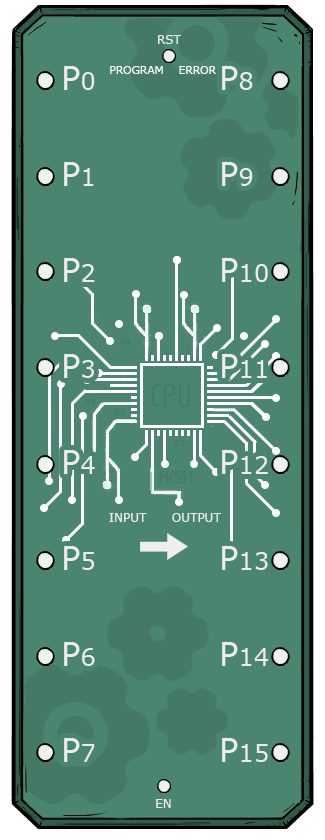
<style>
.page{position:relative;width:325px;height:840px;background:#4a8570}
.page>*{position:absolute;margin:0}
.t1{font:12px "Verdana";color:#ececec}
.t2{font:24px/48px "Verdana";color:#ececec}
.t3{font:32px/48px "Verdana";color:#ececec}
.t4{font:10.7px "Verdana";color:#ffffff}
.t5{font:8px "Verdana";color:#437a66}
.t6{font:32px "Economica-Regular";color:#437a66}
.t7{font:16px "Economica-Regular";color:#437a66}
</style>
<div class="page">
<p class="t1" style="left:158px;top:35px;width:23px;height:9px">RST</p>
<p class="t2" style="left:64px;top:66px;width:205px;height:696px"><span class="t3">P</span>0<span class="t3">           P</span>8<br><span class="t3"><br>P</span>1<span class="t3">           P</span>9<br><span class="t3"><br>P</span>2<span class="t3">           P</span>10<br><span class="t3"><br>P</span>3<span class="t3">           P</span>11<br><span class="t3"><br>P</span>4<span class="t3">           P</span>12<br><span class="t3"><br>P</span>5<span class="t3">           P</span>13<br><span class="t3"><br>P</span>6<span class="t3">           P</span>14<br><span class="t3"><br>P</span>7<span class="t3">           P</span>15</p>
<p class="t4" style="left:110px;top:66px;width:107px;height:8px">PROGRAM    ERROR</p>
<p class="t5" style="left:120px;top:338px;width:11px;height:8px">R4</p>
<p class="t6" style="left:152px;top:384px;width:38px;height:23px">CPU</p>
<p class="t5" style="left:85px;top:398px;width:11px;height:8px">R1</p>
<p class="t5" style="left:114px;top:408px;width:11px;height:8px">R3</p>
<p class="t5" style="left:175px;top:439px;width:10px;height:8px">R2</p>
<p class="t7" style="left:160px;top:471px;width:33px;height:12px">MCS51</p>
<p class="t1" style="left:109px;top:513px;width:112px;height:9px">INPUT      OUTPUT</p>
<p class="t1" style="left:156px;top:799px;width:15px;height:9px">EN</p>
</div>
